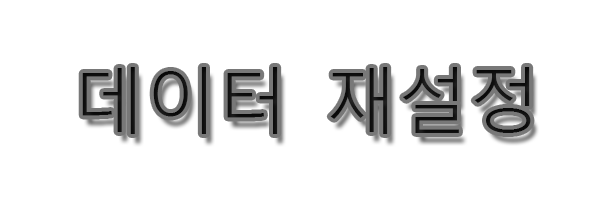
<style>
.page{position:relative;width:600px;height:200px;background:#ffffff}
.page>*{position:absolute;margin:0}
.t1{font:72px "MalgunGothic-Semilight";color:#0e0e0e}
</style>
<div class="page">
<p class="t1" style="left:82px;top:67px;width:449px;height:67px">데이터 재설정</p>
</div>
